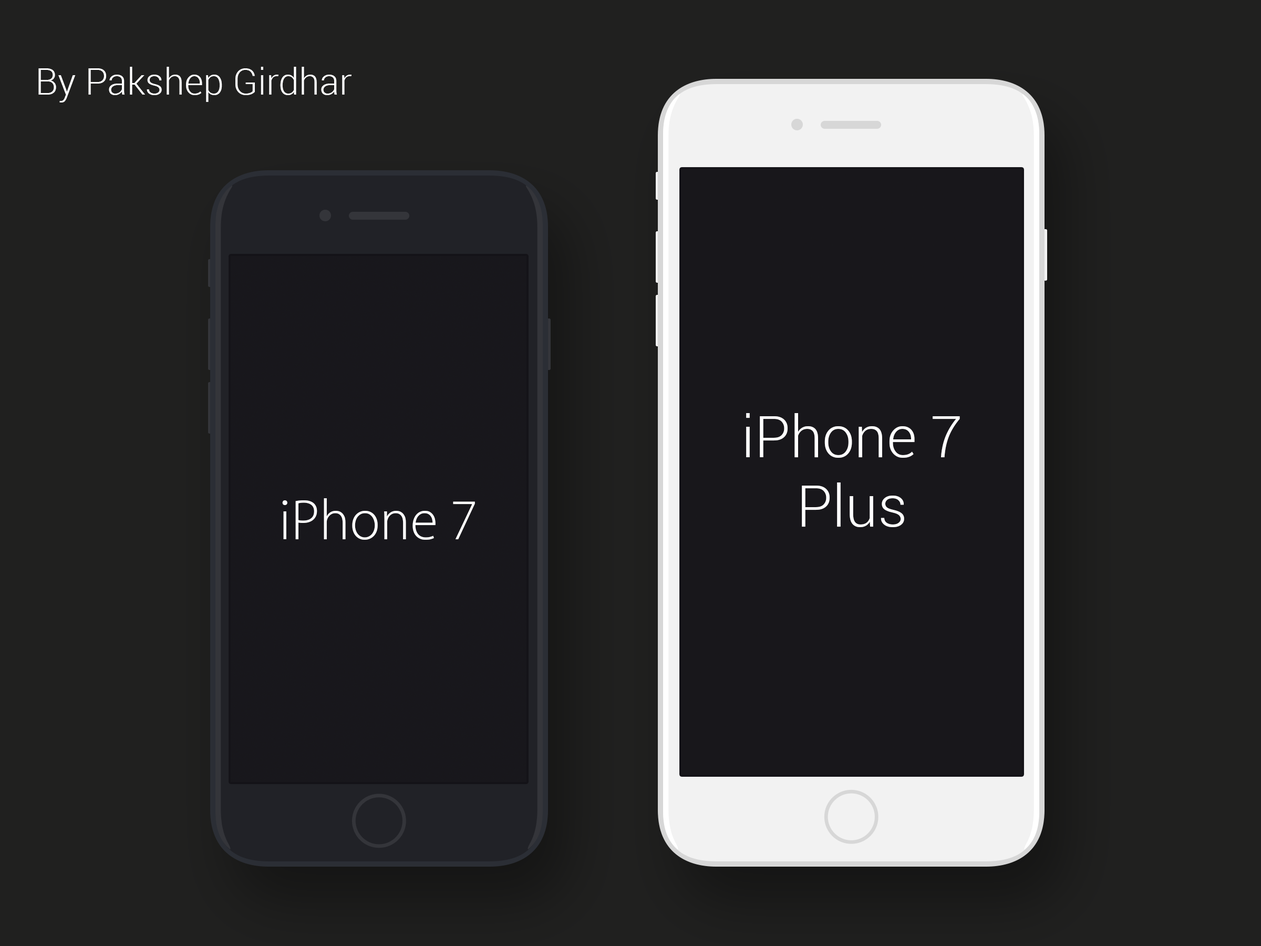
<style>
.page{position:relative;width:1261px;height:946px;background:#20201f}
.page>*{position:absolute;margin:0}
.t1{font:36.8px "Roboto-Light";color:#ffffff}
.t2{font:57.8px "Roboto-Light";color:#ffffff}
.t3{font:57.8px "MyriadSetPro-Thin";color:#ffffff}
</style>
<div class="page">
<p class="t1" style="left:38px;top:67px;width:313px;height:35px">By Pakshep Girdhar</p>
<p class="t2" style="left:746px;top:413px;width:214px;height:114px;text-align:center">iPhone 7<br>Plus</p>
<p class="t3" style="left:282px;top:498px;width:193px;height:42px">iPhone 7</p>
</div>
